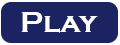
<style>
.page{position:relative;width:120px;height:45px;background:#1b2362}
.page>*{position:absolute;margin:0}
.t1{font:30px "CopperplateGothic-Bold";color:#ffffff}
</style>
<div class="page">
<p class="t1" style="left:21px;top:12px;width:77px;height:21px">Play</p>
</div>
